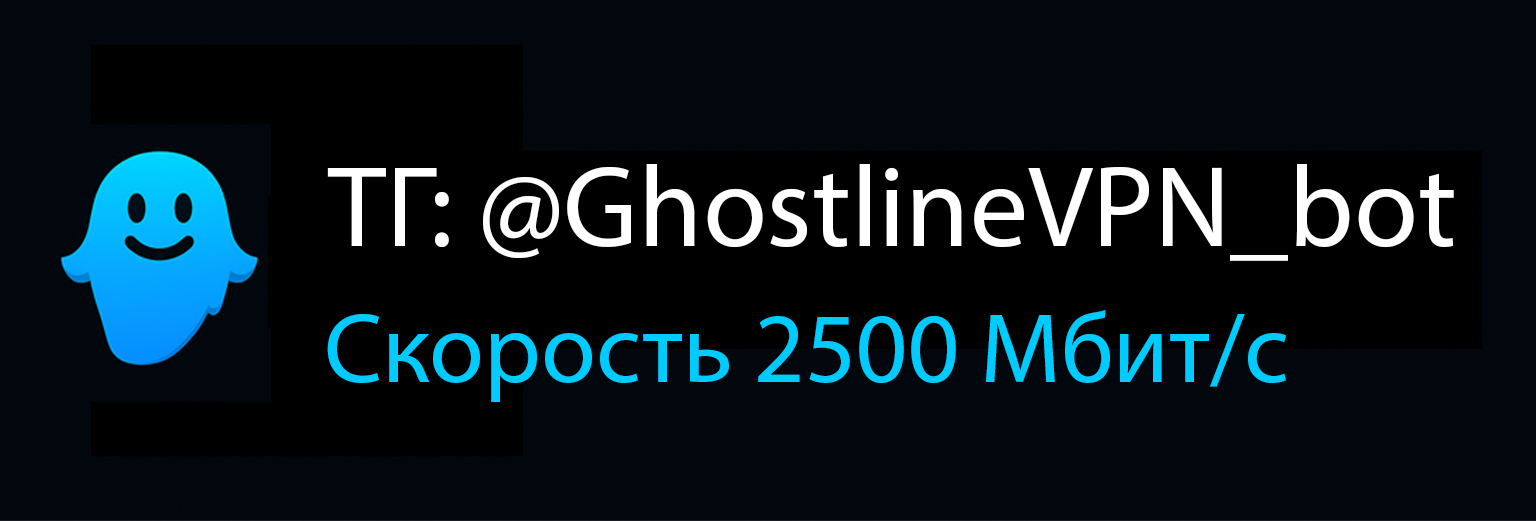
<style>
.page{position:relative;width:1536px;height:521px;background:#000000}
.page>*{position:absolute;margin:0}
.t1{font:116px "MyriadPro-Regular";color:#ffffff}
.t2{font:100px "MyriadPro-Regular";color:#00cbff}
</style>
<div class="page">
<p class="t1" style="left:327px;top:164px;width:1127px;height:97px">ТГ: @GhostlineVPN_bot</p>
<p class="t2" style="left:327px;top:310px;width:959px;height:92px">Скорость 2500 Мбит/с</p>
</div>
